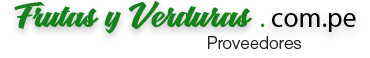
<style>
.page{position:relative;width:370px;height:58px;background:#ffffff}
.page>*{position:absolute;margin:0}
.t1{font:27.5px "GracelandPersonalUse";color:#17811c}
.t2{font:27.5px "MyriadPro-Regular";color:#17811c}
.t3{font:27.5px "MyriadPro-Regular";color:#000000}
.t4{font:16.8px "HelveticaLTStd-Light";color:#252525}
</style>
<div class="page">
<p class="t1" style="left:14px;top:1px;width:342px;height:33px">Frutas y Verduras <span class="t2">. </span><span class="t3">com.pe</span></p>
<p class="t4" style="left:208px;top:36px;width:93px;height:13px">Proveedores</p>
</div>
